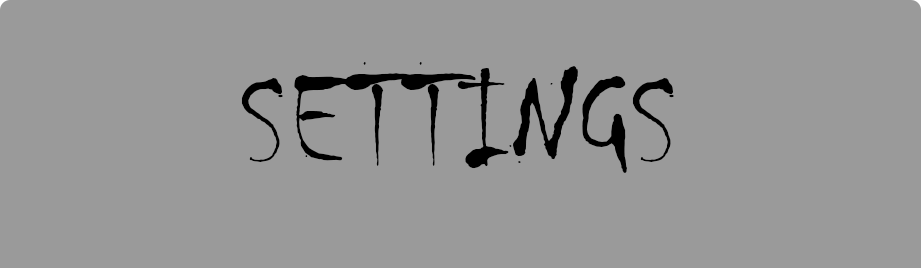
<style>
.page{position:relative;width:921px;height:268px;background:#9a9a9a}
.page>*{position:absolute;margin:0}
.t1{font:141.7px "Chiller-Regular";color:#000000}
</style>
<div class="page">
<p class="t1" style="left:241px;top:62px;width:433px;height:111px">SETTINGS</p>
</div>
